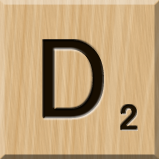
<style>
.page{position:relative;width:159px;height:159px}
.page>*{position:absolute;margin:0}
.t1{font:116px "MS-UIGothic";color:#180e01}
.t2{font:36px "MS-UIGothic";color:#1c1101;font-weight:bold;scale:1.1 1}
</style>
<div class="page">
<p class="t1" style="left:43px;top:40px;width:61px;height:79px">D</p>
<p class="t2" style="left:120px;top:104px;width:18px;height:27px">2</p>
</div>
